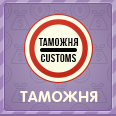
<style>
.page{position:relative;width:116px;height:116px}
.page>*{position:absolute;margin:0}
.t1{font:11.3px "AA-BebasNeue";letter-spacing:0.04em;color:#000000;text-transform:uppercase;scale:1.06 1}
.t2{font:15px "RotondaC-Bold";letter-spacing:0.04em;color:#fffbe3;text-transform:uppercase}
</style>
<div class="page">
<p class="t1" style="left:38px;top:38px;width:41px;height:8px">таможня</p>
<p class="t1" style="left:40px;top:54px;width:36px;height:8px">Customs</p>
<p class="t2" style="left:20px;top:91px;width:78px;height:11px">Таможня</p>
</div>
